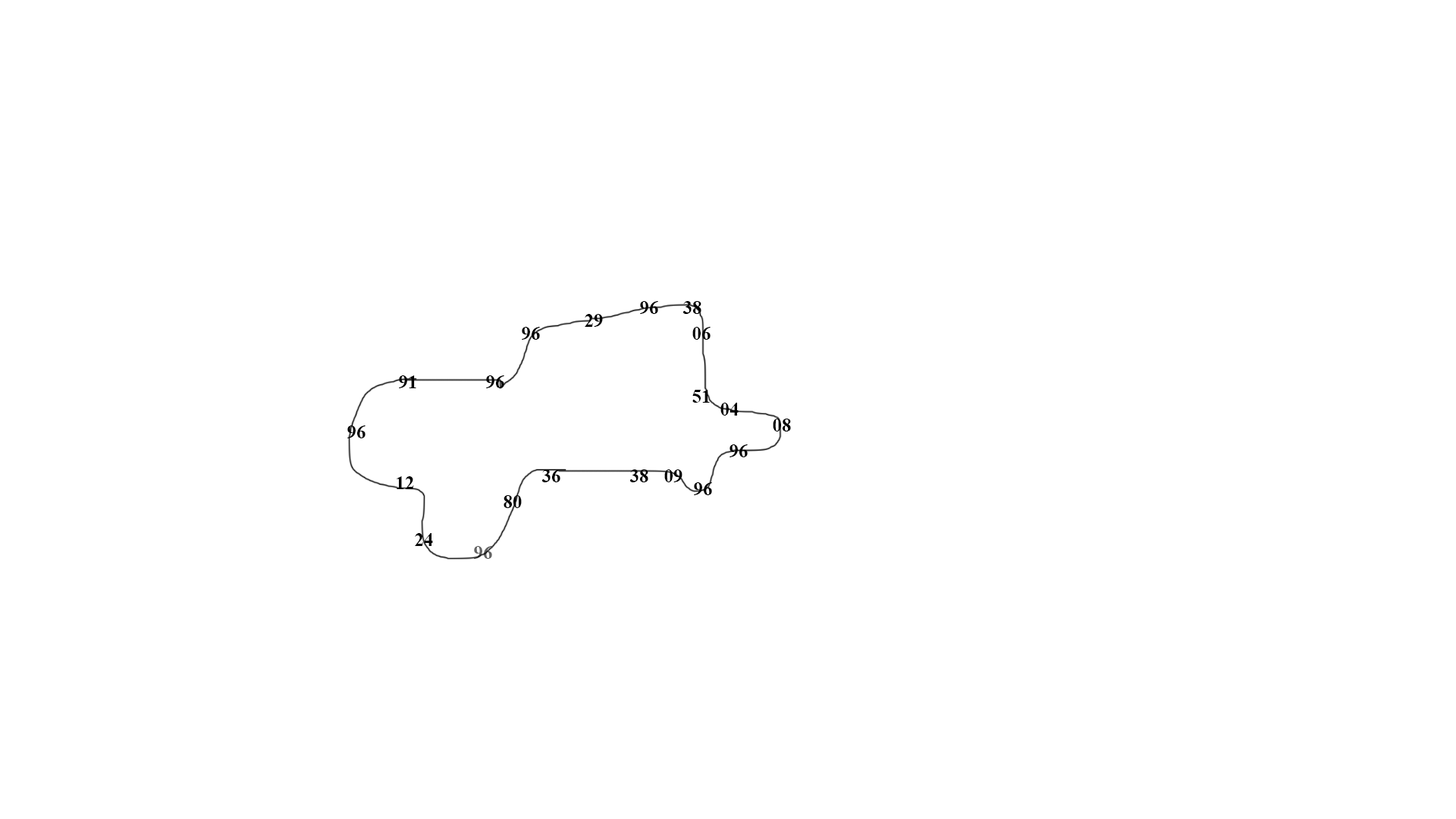
<style>
.page{position:relative;width:1456px;height:819px;background:#ffffff}
.page>*{position:absolute;margin:0}
.t1{font:19px "TimesNewRomanPS-BoldMT";color:#000000}
.t2{font:19px "TimesNewRomanPS-BoldMT";color:#636363}
</style>
<div class="page">
<p class="t1" style="left:640px;top:301px;width:18px;height:13px">96</p>
<p class="t1" style="left:683px;top:301px;width:18px;height:13px">38</p>
<p class="t1" style="left:585px;top:314px;width:18px;height:13px">29</p>
<p class="t1" style="left:522px;top:327px;width:18px;height:13px">96</p>
<p class="t1" style="left:692px;top:327px;width:19px;height:13px">06</p>
<p class="t1" style="left:399px;top:375px;width:17px;height:13px">91</p>
<p class="t1" style="left:486px;top:375px;width:18px;height:13px">96</p>
<p class="t1" style="left:692px;top:390px;width:18px;height:13px">51</p>
<p class="t1" style="left:720px;top:403px;width:19px;height:13px">04</p>
<p class="t1" style="left:347px;top:425px;width:19px;height:13px">96</p>
<p class="t1" style="left:773px;top:419px;width:18px;height:12px">08</p>
<p class="t1" style="left:730px;top:444px;width:18px;height:13px">96</p>
<p class="t1" style="left:542px;top:469px;width:18px;height:13px">36</p>
<p class="t1" style="left:630px;top:469px;width:18px;height:13px">38</p>
<p class="t1" style="left:664px;top:469px;width:18px;height:13px">09</p>
<p class="t1" style="left:397px;top:476px;width:17px;height:13px">12</p>
<p class="t1" style="left:694px;top:482px;width:18px;height:13px">96</p>
<p class="t1" style="left:504px;top:495px;width:18px;height:13px">80</p>
<p class="t1" style="left:415px;top:533px;width:18px;height:13px">24</p>
<p class="t2" style="left:474px;top:546px;width:18px;height:13px">96</p>
</div>
